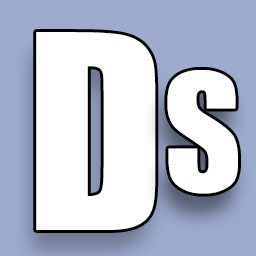
<style>
.page{position:relative;width:256px;height:256px;background:#ffffff}
.page>*{position:absolute;margin:0}
.t1{font:250px "Impact";color:#ffffff}
.t2{font:150px "Impact";color:#ffffff}
</style>
<div class="page">
<p class="t1" style="left:36px;top:32px;width:120px;height:198px">D</p>
<p class="t2" style="left:167px;top:70px;width:71px;height:124px">S</p>
</div>
